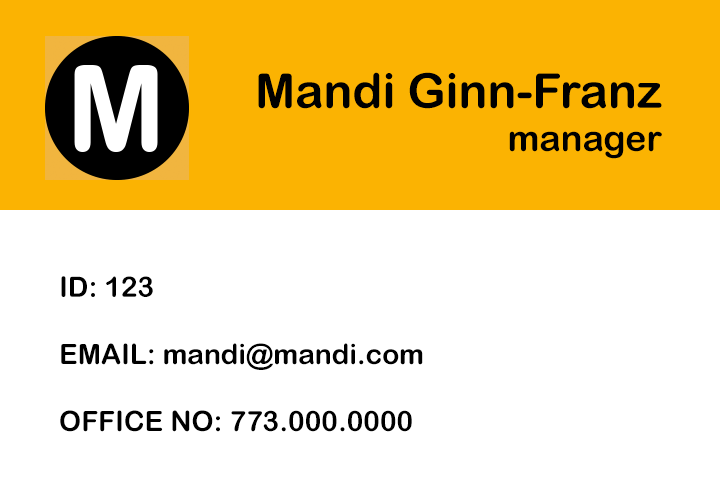
<style>
.page{position:relative;width:720px;height:504px;background:#ffffff}
.page>*{position:absolute;margin:0}
.t1{font:48px "ArialRoundedMTBold";color:#000000}
.t2{font:36px "ArialRoundedMTBold";color:#000000}
.t3{font:28px "ArialRoundedMTBold";color:#000000}
</style>
<div class="page">
<p class="t1" style="left:258px;top:72px;width:404px;height:87px;text-align:right">Mandi Ginn-Franz<br><span class="t2">manager</span></p>
<p class="t3" style="left:60px;top:276px;width:363px;height:156px">ID: 123<br><br>EMAIL: mandi@mandi.com<br><br>OFFICE NO: 773.000.0000</p>
</div>
